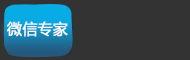
<style>
.page{position:relative;width:190px;height:60px;background:#333333}
.page>*{position:absolute;margin:0}
.t1{font:15px "MicrosoftYaHei";color:#f9fafc;font-weight:bold}
</style>
<div class="page">
<p class="t1" style="left:7px;top:21px;width:61px;height:16px">微信专家</p>
</div>
